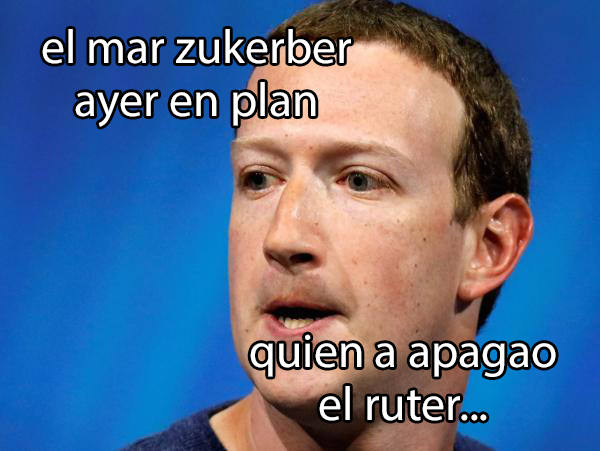
<style>
.page{position:relative;width:600px;height:451px}
.page>*{position:absolute;margin:0}
.t1{font:48px "MyriadPro-Regular";color:#ffffff}
</style>
<div class="page">
<p class="t1" style="left:42px;top:29px;width:309px;height:98px;text-align:center">el mar zukerber<br>ayer en plan</p>
<p class="t1" style="left:250px;top:334px;width:306px;height:87px;text-align:center">quien a apagao<br>el ruter...</p>
</div>
